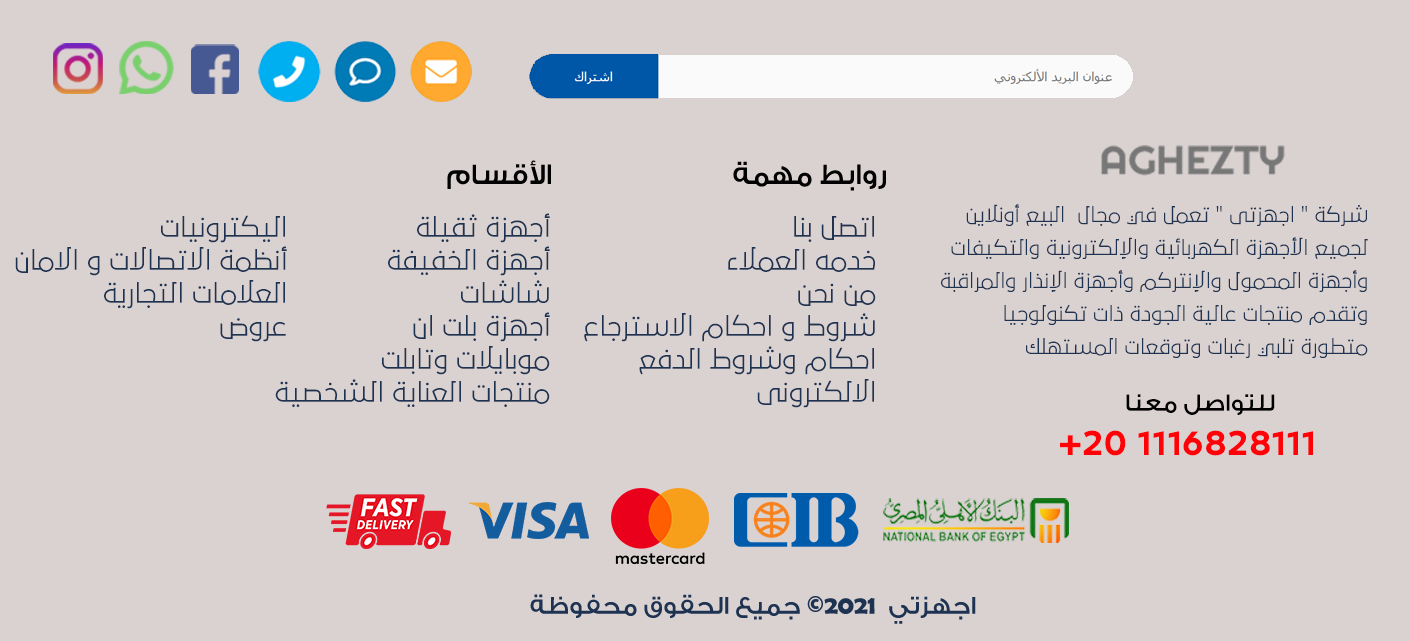
<style>
.page{position:relative;width:1410px;height:641px;background:#dad1d1}
.page>*{position:absolute;margin:0}
.t1{font:30px "GESSTwoMedium-Medium";color:#010101;text-transform:uppercase}
.t2{font:19px/33px "29LTBukra-Regular";color:#1d3351;text-transform:uppercase}
.t3{font:25px/33px "29LTBukra-Regular";color:#1d3351;text-transform:uppercase}
.t4{font:25px "GESSTwoMedium-Medium";color:#010101;text-transform:uppercase}
.t5{font:35px "29LTBukra-Bold";color:#ff0107;text-transform:uppercase}
.t6{font:26px "GESSTwoMedium-Medium";color:#1d3351;text-transform:uppercase}
.t7{font:26px "BerlinSansFBDemi-Bold";color:#1d3351;text-transform:uppercase}
</style>
<div class="page">
<p class="t1" style="left:447px;top:160px;width:104px;height:29px">الأقسام</p>
<p class="t1" style="left:733px;top:161px;width:153px;height:30px">روابط مهمة</p>
<p class="t2" style="left:941px;top:204px;width:427px;height:154px;text-align:right">شركة " اجهزتى " تعمل في مجال  البيع أونلاين لجميع الأجهزة الكهربائية والإلكترونية والتكيفات وأجهزة المحمول والإنتركم وأجهزة الإنذار والمراقبة وتقدم منتجات عالية الجودة ذات تكنولوجيا متطورة تلبي رغبات وتوقعات المستهلك</p>
<p class="t3" style="left:15px;top:215px;width:272px;height:127px;text-align:right">اليكترونيات <br>أنظمة الاتصالات و الامان <br>العلامات التجارية<br>عروض</p>
<p class="t3" style="left:275px;top:213px;width:275px;height:194px;text-align:right">أجهزة ثقيلة <br>أجهزة الخفيفة <br>شاشات <br>أجهزة بلت ان <br>موبايلات وتابلت <br>منتجات العناية الشخصية</p>
<p class="t3" style="left:584px;top:216px;width:292px;height:192px;text-align:right">اتصل بنا<br>خدمه العملاء<br>من نحن<br>شروط و احكام الاسترجاع<br>احكام وشروط الدفع الالكترونى</p>
<p class="t4" style="left:1126px;top:394px;width:149px;height:21px">للتواصل معنا</p>
<p class="t5" style="left:1060px;top:430px;width:253px;height:26px">+20 1116828111</p>
<p class="t6" style="left:530px;top:594px;width:446px;height:30px">اجهزتي <span class="t7"> 2021©</span> جميع الحقوق محفوظة</p>
</div>
